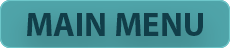
<style>
.page{position:relative;width:230px;height:48px}
.page>*{position:absolute;margin:0}
.t1{font:33.3px "MyriadPro-Bold";color:#113e49}
</style>
<div class="page">
<p class="t1" style="left:27px;top:13px;width:176px;height:23px">MAIN MENU</p>
</div>
